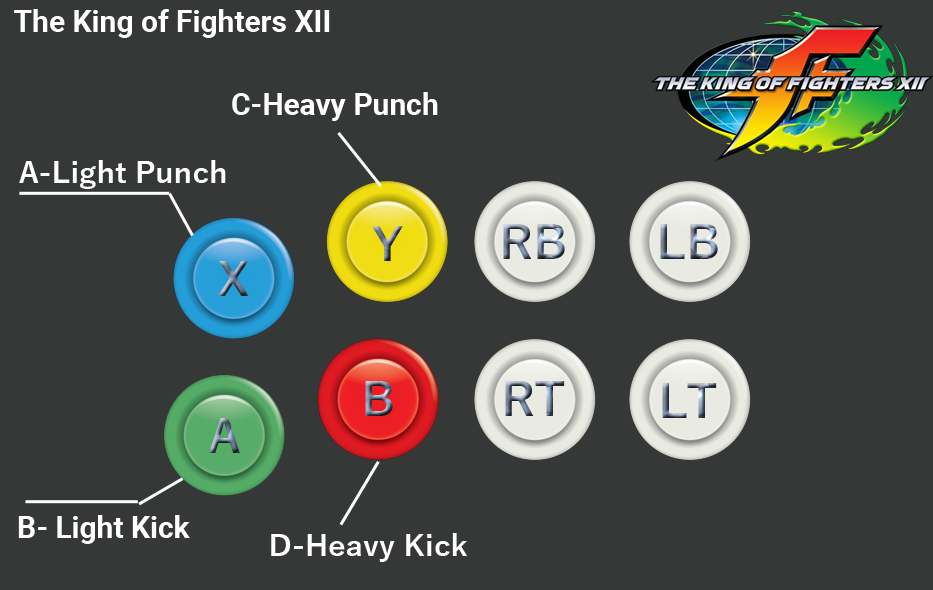
<style>
.page{position:relative;width:933px;height:590px;background:#363838}
.page>*{position:absolute;margin:0}
.t1{font:30px "Roboto-Bold";color:#ffffff}
.t2{font:30px "YuGothic-Bold";color:#ffffff}
</style>
<div class="page">
<p class="t1" style="left:14px;top:9px;width:316px;height:29px">The King of Fighters XII</p>
<p class="t1" style="left:232px;top:92px;width:206px;height:29px">C-Heavy Punch</p>
<p class="t2" style="left:19px;top:160px;width:207px;height:29px">A-Light Punch</p>
<p class="t1" style="left:18px;top:515px;width:172px;height:29px">B- Light Kick</p>
<p class="t2" style="left:271px;top:533px;width:196px;height:29px">D-Heavy Kick</p>
</div>
